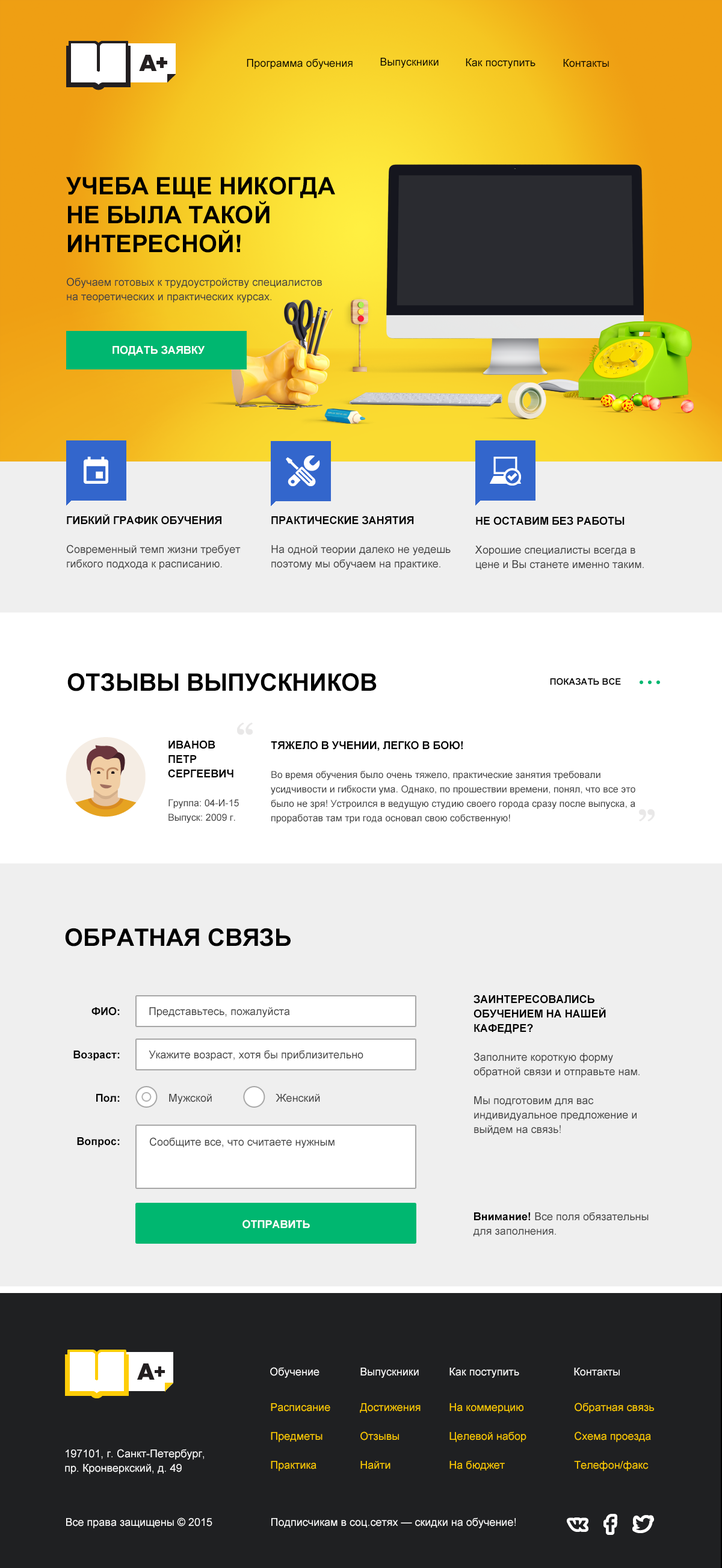
<style>
.page{position:relative;width:722px;height:1568px;background:#efefef}
.page>*{position:absolute;margin:0}
.t1{font:10.8px "ArialMT";color:#000000}
.t2{font:24.1px/28.9px "Arial-BoldMT";color:#000000;text-transform:uppercase}
.t3{font:10.8px/14.4px "ArialMT";color:#404040}
.t4{font:10.8px "Arial-BoldMT";color:#ffffff;text-transform:uppercase}
.t5{font:10.8px/14.4px "Arial-BoldMT";color:#000000;text-transform:uppercase}
.t6{font:24.1px "Arial-BoldMT";color:#000000;text-transform:uppercase}
.t7{font:9px "Arial-BoldMT";color:#000000}
.t8{font:9.6px/14.4px "ArialMT";color:#404040}
.t9{font:10.8px/14.4px "Arial-BoldMT";color:#000000}
.t10{font:10.8px "ArialMT";color:#404040}
.t11{font:10.8px "ArialMT";color:#ffffff}
.t12{font:10.8px/14.4px "ArialMT";color:#ffcc00}
.t13{font:10.8px/14.4px "ArialMT";color:#ffffff}
</style>
<div class="page">
<p class="t1" style="left:247px;top:58px;width:106px;height:11px">Программа обучения</p>
<p class="t1" style="left:380px;top:58px;width:59px;height:10px">Выпускники</p>
<p class="t1" style="left:466px;top:58px;width:70px;height:11px">Как поступить</p>
<p class="t1" style="left:563px;top:59px;width:46px;height:8px">Контакты</p>
<p class="t2" style="left:66px;top:176px;width:269px;height:77px">Учеба еще никогда не была такой интересной!</p>
<p class="t3" style="left:67px;top:277px;width:255px;height:26px">Обучаем готовых к трудоустройству специалистов<br>на теоретических и практических курсах.</p>
<p class="t4" style="left:113px;top:345px;width:92px;height:11px">Подать заявку</p>
<p class="t3" style="left:67px;top:514px;width:174px;height:56px"><span class="t5">Гибкий график обучения<br></span><br>Современный темп жизни требует гибкого подхода к расписанию.</p>
<p class="t3" style="left:271px;top:516px;width:180px;height:54px"><span class="t5">Практические занятия<br></span><br>На одной теории далеко не уедешь поэтому мы обучаем на практике.</p>
<p class="t3" style="left:475px;top:516px;width:169px;height:54px"><span class="t5">Не оставим без работы<br></span><br>Хорошие специалисты всегда в цене и Вы станете именно таким.</p>
<p class="t6" style="left:67px;top:673px;width:310px;height:18px">Отзывы выпускников</p>
<p class="t7" style="left:550px;top:678px;width:71px;height:7px">ПОКАЗАТЬ ВСЕ</p>
<p class="t8" style="left:168px;top:740px;width:71px;height:83px"><span class="t5">Иванов<br>Петр<br>Сергеевич<br><br></span>Группа: 04-И-15<br>Выпуск: 2009 г.</p>
<p class="t8" style="left:271px;top:741px;width:364px;height:83px"><span class="t5">Тяжело в учении, легко в бою!<br><br></span>Во время обучения было очень тяжело, практические занятия требовали усидчивости и гибкости ума. Однако, по прошествии времени, понял, что все это было не зря! Устроился в ведущую студию своего города сразу после выпуска, а проработав там три года основал свою собственную!</p>
<p class="t6" style="left:65px;top:928px;width:226px;height:18px">Обратная связь</p>
<p class="t3" style="left:474px;top:995px;width:166px;height:140px"><span class="t5">Заинтересовались обучением на нашей кафедре?<br></span><br>Заполните короткую форму обратной связи и отправьте нам.<br><br>Мы подготовим для вас индивидуальное предложение и выйдем на связь!</p>
<p class="t9" style="left:73px;top:1007px;width:47px;height:140px;text-align:right">ФИО:<br><br><br>Возраст:<br><br><br>Пол:<br><br><br>Вопрос:</p>
<p class="t10" style="left:149px;top:1007px;width:141px;height:10px">Представьтесь, пожалуйста</p>
<p class="t10" style="left:149px;top:1050px;width:214px;height:11px">Укажите возраст, хотя бы приблизительно</p>
<p class="t10" style="left:169px;top:1094px;width:43px;height:10px">Мужской</p>
<p class="t10" style="left:276px;top:1094px;width:44px;height:8px">Женский</p>
<p class="t10" style="left:150px;top:1137px;width:185px;height:11px">Сообщите все, что считаете нужным</p>
<p class="t3" style="left:473px;top:1212px;width:176px;height:24px"><span class="t9">Внимание! </span>Все поля обязательны<br>для заполнения.</p>
<p class="t4" style="left:242px;top:1220px;width:68px;height:9px">Отправить</p>
<p class="t11" style="left:270px;top:1367px;width:49px;height:11px">Обучение</p>
<p class="t11" style="left:360px;top:1368px;width:59px;height:10px">Выпускники</p>
<p class="t11" style="left:449px;top:1368px;width:70px;height:10px">Как поступить</p>
<p class="t11" style="left:574px;top:1368px;width:46px;height:8px">Контакты</p>
<p class="t12" style="left:271px;top:1403px;width:59px;height:68px">Расписание<br><br>Предметы<br><br>Практика</p>
<p class="t12" style="left:360px;top:1403px;width:61px;height:66px">Достижения<br><br>Отзывы<br><br>Найти</p>
<p class="t12" style="left:449px;top:1403px;width:77px;height:68px">На коммерцию<br><br>Целевой набор<br><br>На бюджет</p>
<p class="t12" style="left:574px;top:1403px;width:80px;height:68px">Обратная связь<br><br>Схема проезда<br><br>Телефон/факс</p>
<p class="t13" style="left:65px;top:1449px;width:139px;height:25px">197101, г. Санкт-Петербург, <br>пр. Кронверкский, д. 49</p>
<p class="t11" style="left:66px;top:1517px;width:146px;height:11px">Все права защищены © 2015</p>
<p class="t11" style="left:271px;top:1517px;width:245px;height:11px">Подписчикам в соц.сетях — скидки на обучение!</p>
</div>
